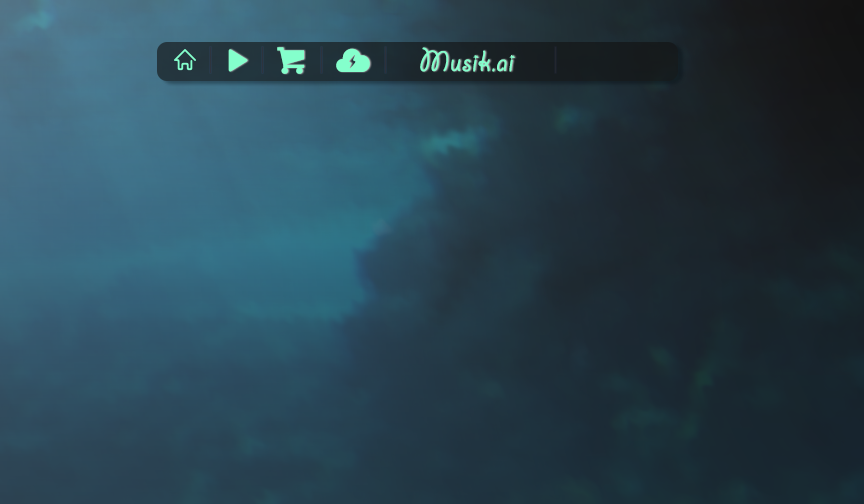
<style>
.page{position:relative;width:864px;height:504px}
.page>*{position:absolute;margin:0}
.t1{font:32.4px "GiddyupStd";color:#84ffcc;font-weight:bold}
</style>
<div class="page">
<p class="t1" style="left:420px;top:47px;width:95px;height:25px">Musik.ai</p>
</div>
